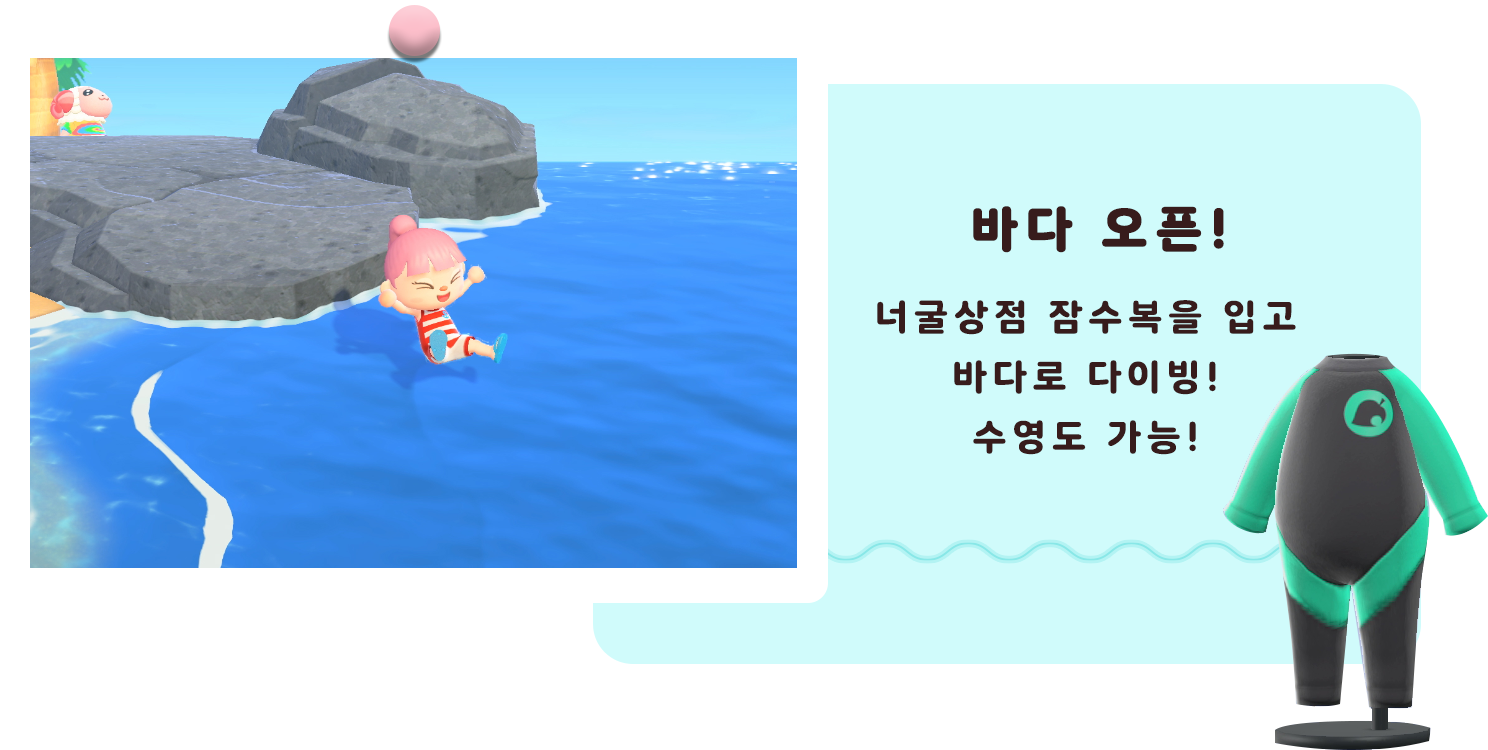
<style>
.page{position:relative;width:1488px;height:750px;background:#ffffff}
.page>*{position:absolute;margin:0}
.t1{font:48px "TmoneyRoundWind-ExtraBold";letter-spacing:0.14em;color:#371c1c;font-weight:bold}
.t2{font:36px/60px "TmoneyRoundWind-ExtraBold";letter-spacing:0.14em;color:#371c1c}
</style>
<div class="page">
<p class="t1" style="left:973px;top:206px;width:251px;height:47px">바다 오픈!</p>
<p class="t2" style="left:877px;top:300px;width:419px;height:155px;text-align:center">너굴상점 잠수복을 입고<br>바다로 다이빙!<br>수영도 가능!</p>
</div>
